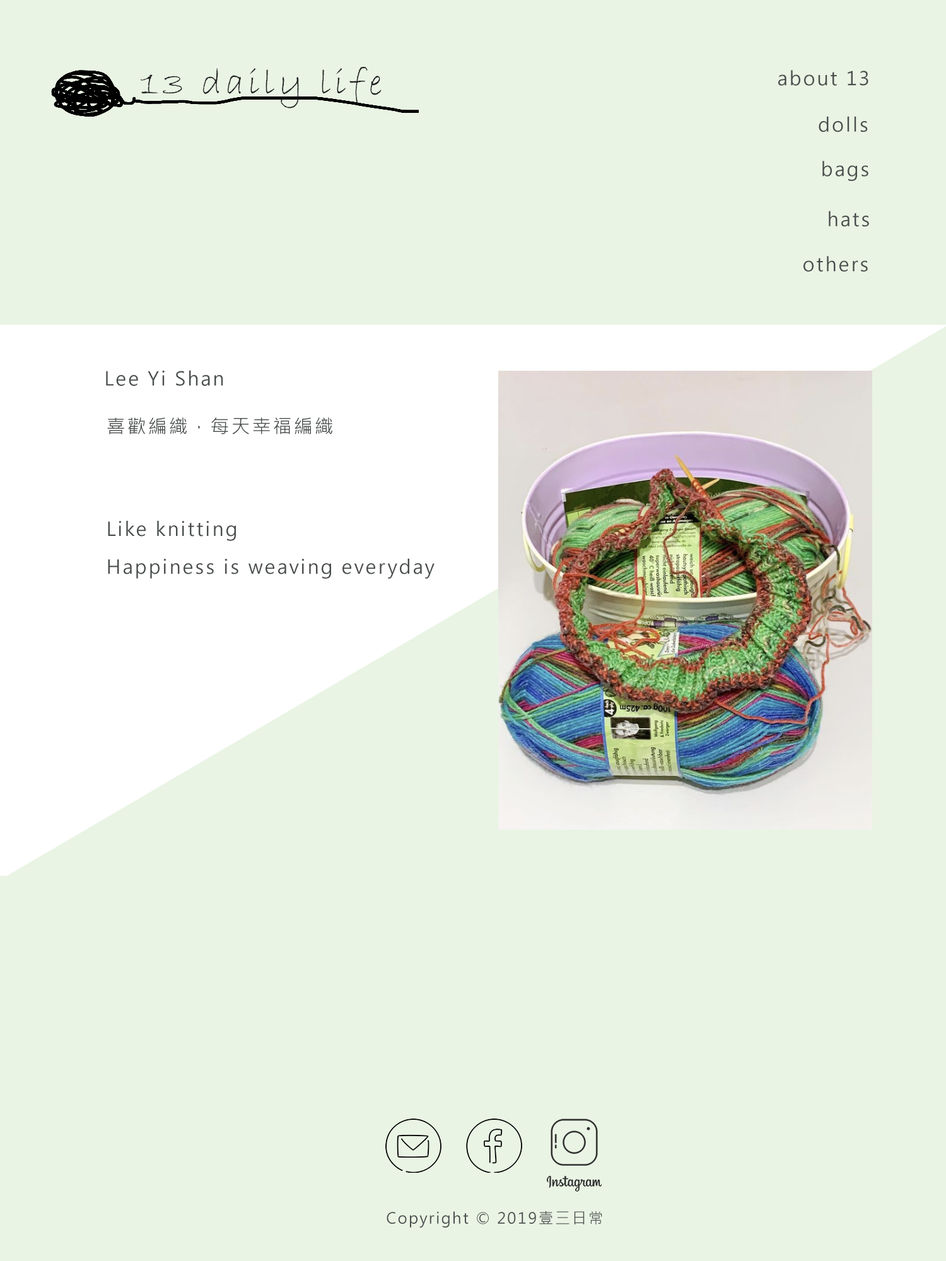
<style>
.page{position:relative;width:946px;height:1261px;background:#e9f4e4}
.page>*{position:absolute;margin:0}
.t1{font:37.8px "BradleyHandITC";letter-spacing:0.1em;color:#202020}
.t2{font:18.9px "MicrosoftJhengHeiRegular";letter-spacing:0.1em;color:#494e4d}
.t3{font:18.9px/18.9px "MicrosoftJhengHeiRegular";letter-spacing:0.1em;color:#494e4d}
.t4{font:15.1px "MicrosoftJhengHeiRegular";letter-spacing:0.1em;color:#494e4d}
</style>
<div class="page">
<p class="t1" style="left:141px;top:66px;width:240px;height:42px">13 daily life</p>
<p class="t2" style="left:778px;top:70px;width:90px;height:16px">about 13</p>
<p class="t2" style="left:818px;top:116px;width:50px;height:16px">dolls</p>
<p class="t2" style="left:822px;top:161px;width:46px;height:20px">bags</p>
<p class="t2" style="left:828px;top:211px;width:41px;height:16px">hats</p>
<p class="t2" style="left:803px;top:256px;width:65px;height:16px">others</p>
<p class="t2" style="left:106px;top:370px;width:117px;height:16px">Lee Yi Shan</p>
<p class="t2" style="left:107px;top:417px;width:225px;height:17px">喜歡編織，每天幸福編織</p>
<p class="t3" style="left:108px;top:521px;width:326px;height:58px">Like knitting<br><br>Happiness is weaving everyday</p>
<p class="t4" style="left:386px;top:1210px;width:216px;height:18px">Copyright © 2019壹三日常</p>
</div>
